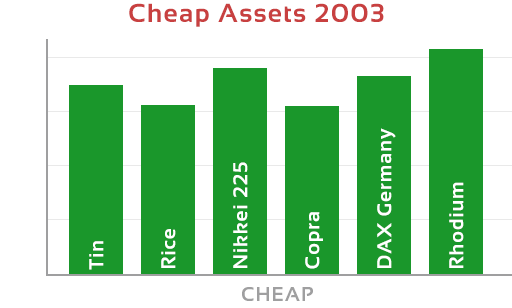
<style>
.page{position:relative;width:512px;height:308px;background:#ffffff}
.page>*{position:absolute;margin:0}
.t1{font:26px "Sansation-Bold";letter-spacing:0.05em;color:#c84040}
.t2{font:20px "Sansation-Bold";letter-spacing:0.05em;color:#ffffff}
.t3{font:20px "Sansation-Bold";letter-spacing:0.05em;color:#9f9fa0}
</style>
<div class="page">
<p class="t1" style="left:129px;top:3px;width:255px;height:24px">Cheap Assets 2003</p>
<p class="t2" style="left:377px;top:128px;width:19px;height:140px;rotate:-90deg">DAX Germany</p>
<p class="t2" style="left:233px;top:162px;width:15px;height:106px;rotate:-90deg">Nikkei 225</p>
<p class="t2" style="left:449px;top:182px;width:15px;height:86px;rotate:-90deg">Rhodium</p>
<p class="t2" style="left:305px;top:212px;width:18px;height:57px;rotate:-90deg">Copra</p>
<p class="t2" style="left:161px;top:229px;width:15px;height:39px;rotate:-90deg">Rice</p>
<p class="t2" style="left:89px;top:241px;width:15px;height:29px;rotate:-90deg">Tin</p>
<p class="t3" style="left:242px;top:287px;width:71px;height:14px">CHEAP</p>
</div>
